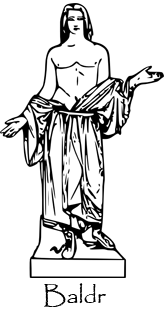
<style>
.page{position:relative;width:164px;height:314px;background:#ffffff}
.page>*{position:absolute;margin:0}
.t1{font:24px "Papyrus-Regular";color:#000000}
</style>
<div class="page">
<p class="t1" style="left:44px;top:283px;width:62px;height:24px">Baldr</p>
</div>
